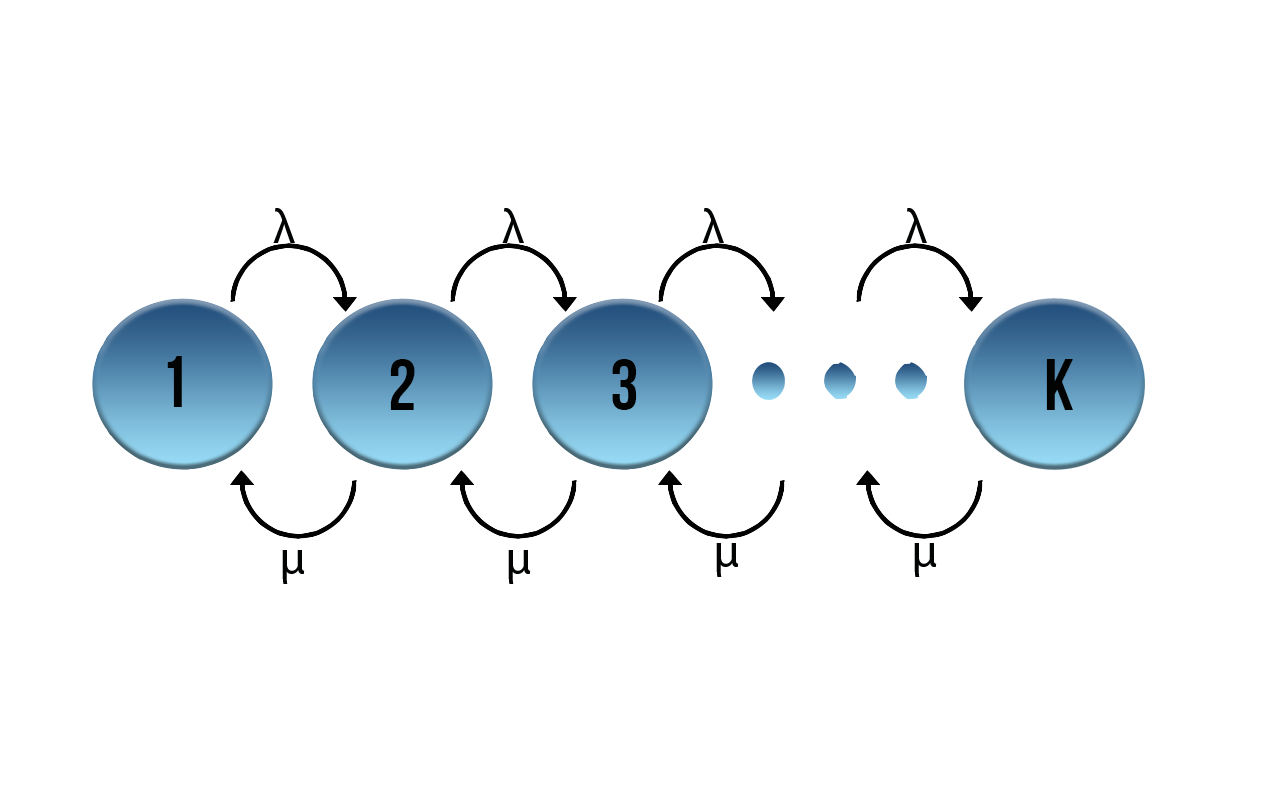
<style>
.page{position:relative;width:1280px;height:800px;background:#ffffff}
.page>*{position:absolute;margin:0}
.t1{font:48px "MyriadPro-Regular";color:#020303}
.t2{font:72px "BebasNeueBold";color:#020303}
</style>
<div class="page">
<p class="t1" style="left:273px;top:208px;width:22px;height:35px">λ</p>
<p class="t1" style="left:502px;top:208px;width:22px;height:35px">λ</p>
<p class="t1" style="left:702px;top:208px;width:22px;height:35px">λ</p>
<p class="t1" style="left:905px;top:208px;width:22px;height:35px">λ</p>
<p class="t2" style="left:167px;top:356px;width:15px;height:51px">1</p>
<p class="t2" style="left:390px;top:359px;width:25px;height:51px">2</p>
<p class="t2" style="left:612px;top:359px;width:25px;height:51px">3</p>
<p class="t2" style="left:1046px;top:359px;width:27px;height:51px">K</p>
<p class="t1" style="left:716px;top:543px;width:23px;height:34px">μ</p>
<p class="t1" style="left:914px;top:543px;width:23px;height:34px">μ</p>
<p class="t1" style="left:282px;top:550px;width:23px;height:34px">μ</p>
<p class="t1" style="left:508px;top:550px;width:23px;height:34px">μ</p>
</div>
